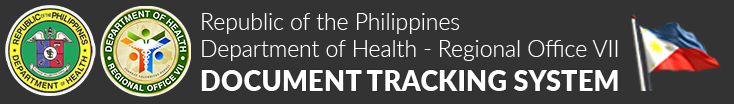
<style>
.page{position:relative;width:734px;height:104px;background:#333333}
.page>*{position:absolute;margin:0}
.t1{font:22.9px "Lato-Light";color:#ffffff}
.t2{font:27.6px "Lato-Black";color:#ffffff}
</style>
<div class="page">
<p class="t1" style="left:202px;top:13px;width:416px;height:48px">Republic of the Philippines<br>Department of Health - Regional Office VII</p>
<p class="t2" style="left:201px;top:70px;width:417px;height:21px">DOCUMENT TRACKING SYSTEM</p>
</div>
